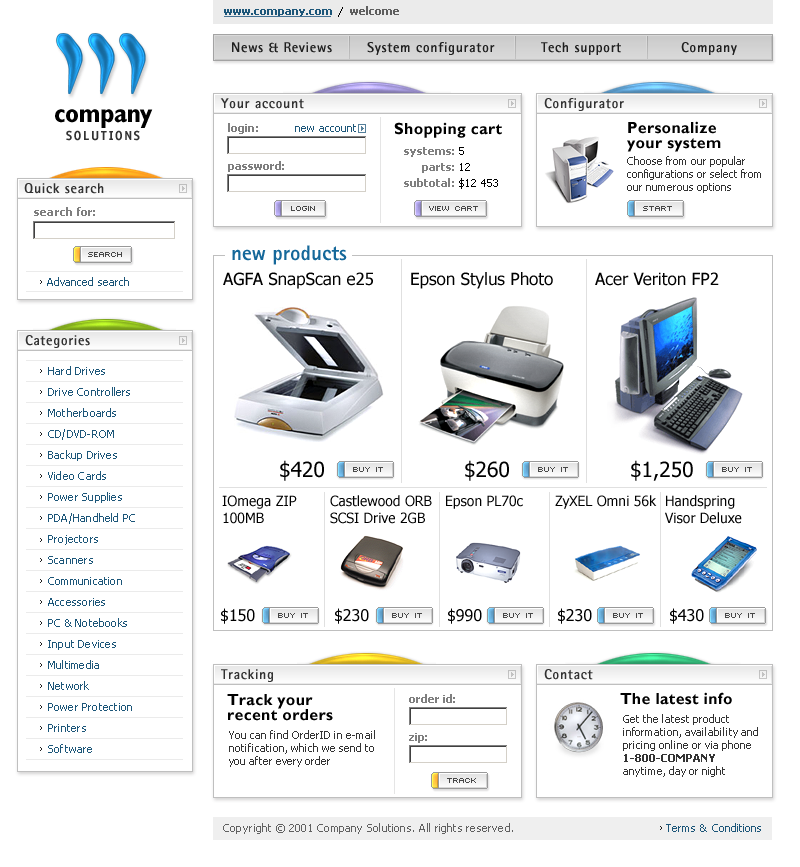
<style>
.page{position:relative;width:800px;height:867px;background:#ffffff}
.page>*{position:absolute;margin:0}
.t1{font:11px "Tahoma-Bold";color:#5e5e5e}
.t2{font:11px "Tahoma-Bold";color:#1c5679}
.t3{font:14px "RotisSansSerif-ExtraBold";letter-spacing:0.04em;color:#252525}
.t4{font:14px "RotisSansSerif-ExtraBold";letter-spacing:0.04em;color:#313131}
.t5{font:27px "GillSans-BoldCondensed";letter-spacing:-0.02em;color:#000000}
.t6{font:11px "Tahoma-Bold";letter-spacing:0.02em;color:#7f7f7f}
.t7{font:11px "Tahoma";letter-spacing:0.02em;color:#1c5679}
.t8{font:16px "GillSans-Bold";letter-spacing:0.02em;color:#000000}
.t9{font:16px/15px "GillSans-Bold";letter-spacing:0.02em;color:#000000}
.t10{font:13px "OfficinaSansCTT-Bold";letter-spacing:0.12em;color:#333333}
.t11{font:11px/16px "Tahoma-Bold";letter-spacing:0.02em;color:#7f7f7f}
.t12{font:11px/16px "Tahoma";letter-spacing:0.02em;color:#000000}
.t13{font:11px "Tahoma";letter-spacing:-0.005em;color:#333333}
.t14{font:21px "RotisSansSerif-ExtraBold";color:#15689a}
.t15{font:11px/21px "Tahoma";letter-spacing:0.02em;color:#1c5679}
.t16{font:11px "Tahoma";color:#333333}
.t17{font:11px "Tahoma-Bold";color:#333333}
.t18{font:11px "Tahoma";letter-spacing:0.02em;color:#606060}
</style>
<div class="page">
<p class="t1" style="left:350px;top:6px;width:49px;height:9px">welcome</p>
<p class="t2" style="left:224px;top:9px;width:108px;height:8px">www.company.com</p>
<p class="t3" style="left:232px;top:42px;width:100px;height:11px">News &amp; Reviews</p>
<p class="t3" style="left:367px;top:42px;width:128px;height:13px">System configurator</p>
<p class="t3" style="left:541px;top:42px;width:80px;height:13px">Tech support</p>
<p class="t3" style="left:681px;top:42px;width:56px;height:13px">Company</p>
<p class="t4" style="left:220px;top:98px;width:84px;height:11px">Your account</p>
<p class="t4" style="left:544px;top:98px;width:80px;height:13px">Configurator</p>
<p class="t5" style="left:55px;top:109px;width:98px;height:19px">company</p>
<p class="t6" style="left:228px;top:123px;width:30px;height:11px">login:</p>
<p class="t7" style="left:295px;top:124px;width:61px;height:8px">new account</p>
<p class="t8" style="left:394px;top:122px;width:108px;height:16px">Shopping cart</p>
<p class="t9" style="left:627px;top:121px;width:94px;height:31px">Personalize<br>your system</p>
<p class="t10" style="left:66px;top:130px;width:74px;height:11px">SOLUTIONS</p>
<p class="t11" style="left:404px;top:147px;width:50px;height:40px;text-align:right">systems:<br>parts:<br>subtotal:</p>
<p class="t12" style="left:459px;top:147px;width:39px;height:42px">5<br>12<br>$12 453</p>
<p class="t6" style="left:228px;top:161px;width:56px;height:11px">password:</p>
<p class="t13" style="left:627px;top:156px;width:134px;height:37px">Choose from our popular <br>configurations or select from <br>our numerous options</p>
<p class="t4" style="left:24px;top:183px;width:80px;height:11px">Quick search</p>
<p class="t6" style="left:34px;top:207px;width:61px;height:9px">search for:</p>
<p class="t14" style="left:232px;top:245px;width:115px;height:20px">new products</p>
<p class="t7" style="left:47px;top:277px;width:82px;height:9px">Advanced search</p>
<p class="t4" style="left:25px;top:335px;width:65px;height:13px">Categories</p>
<p class="t15" style="left:48px;top:366px;width:87px;height:387px">Hard Drives <br>Drive Controllers <br>Motherboards <br>CD/DVD-ROM <br>Backup Drives <br>Video Cards <br>Power Supplies <br>PDA/Handheld PC <br>Projectors <br>Scanners <br>Communication <br>Accessories <br>PC &amp; Notebooks <br>Input Devices <br>Multimedia <br>Network <br>Power Protection <br>Printers <br>Software</p>
<p class="t4" style="left:221px;top:669px;width:52px;height:13px">Tracking</p>
<p class="t4" style="left:544px;top:669px;width:49px;height:11px">Contact</p>
<p class="t9" style="left:227px;top:694px;width:106px;height:27px">Track your<br>recent orders</p>
<p class="t6" style="left:409px;top:694px;width:46px;height:9px">order id:</p>
<p class="t8" style="left:620px;top:692px;width:112px;height:13px">The latest info</p>
<p class="t16" style="left:623px;top:714px;width:135px;height:63px">Get the latest product <br>information, availability and <br>pricing online or via phone<br><span class="t17">1-800-COMPANY </span><br>anytime, day or night</p>
<p class="t16" style="left:229px;top:730px;width:146px;height:37px">You can find OrderID in e-mail<br>notification, which we send to<br>you after every order</p>
<p class="t6" style="left:409px;top:733px;width:18px;height:10px">zip:</p>
<p class="t18" style="left:223px;top:823px;width:290px;height:11px">Copyright © 2001 Company Solutions. All rights reserved.</p>
<p class="t7" style="left:666px;top:823px;width:95px;height:9px">Terms &amp; Conditions</p>
</div>
